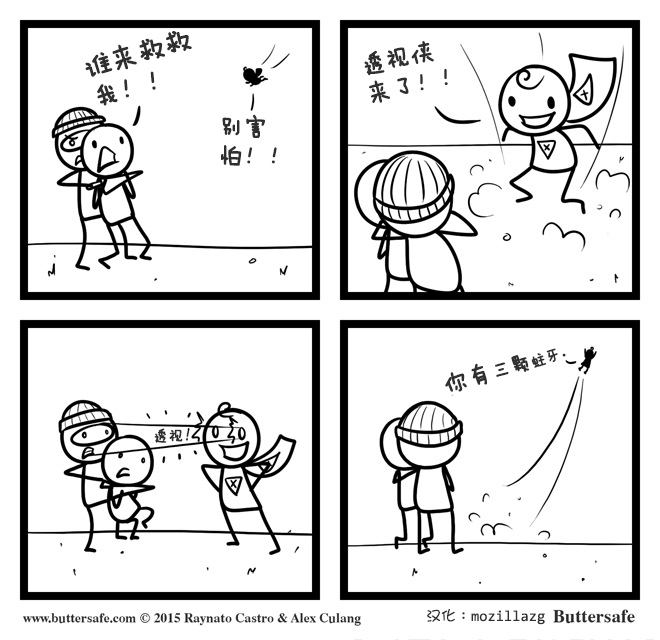
<style>
.page{position:relative;width:660px;height:640px;background:#ffffff}
.page>*{position:absolute;margin:0}
.t1{font:27px/31px "FZMWJW--GB1-0";color:#2f2f2f;font-weight:bold}
.t2{font:24px/29px "FZMWJW--GB1-0";color:#2f2f2f;font-weight:bold}
.t3{font:15px "FZMWJW--GB1-0";color:#2f2f2f;font-weight:bold}
.t4{font:24px "FZMWJW--GB1-0";color:#2f2f2f;font-weight:bold}
.t5{font:20px "FZMWJW--GB1-0";color:#2f2f2f;font-weight:bold}
.t6{font:15px "YaHei-Consolas-Hybrid";color:#2f2f2f}
.t7{font:15px "DFGirl";color:#2f2f2f}
</style>
<div class="page">
<p class="t1" style="left:85px;top:31px;width:107px;height:75px;rotate:-16deg">谁来救救<br>我！！</p>
<p class="t2" style="left:364px;top:41px;width:84px;height:62px;rotate:-12deg">透视侠<br>来了！！</p>
<p class="t2" style="left:221px;top:114px;width:56px;height:52px">别害<br>怕！！</p>
<p class="t3" style="left:445px;top:348px;width:121px;height:44px;rotate:-17deg"><span class="t4">你有</span><span class="t5">三颗</span>蛀牙。</p>
<p class="t3" style="left:154px;top:428px;width:35px;height:15px">透视！</p>
<p class="t6" style="left:427px;top:608px;width:118px;height:17px"><span class="t7">汉化：</span>mozillazg</p>
</div>
